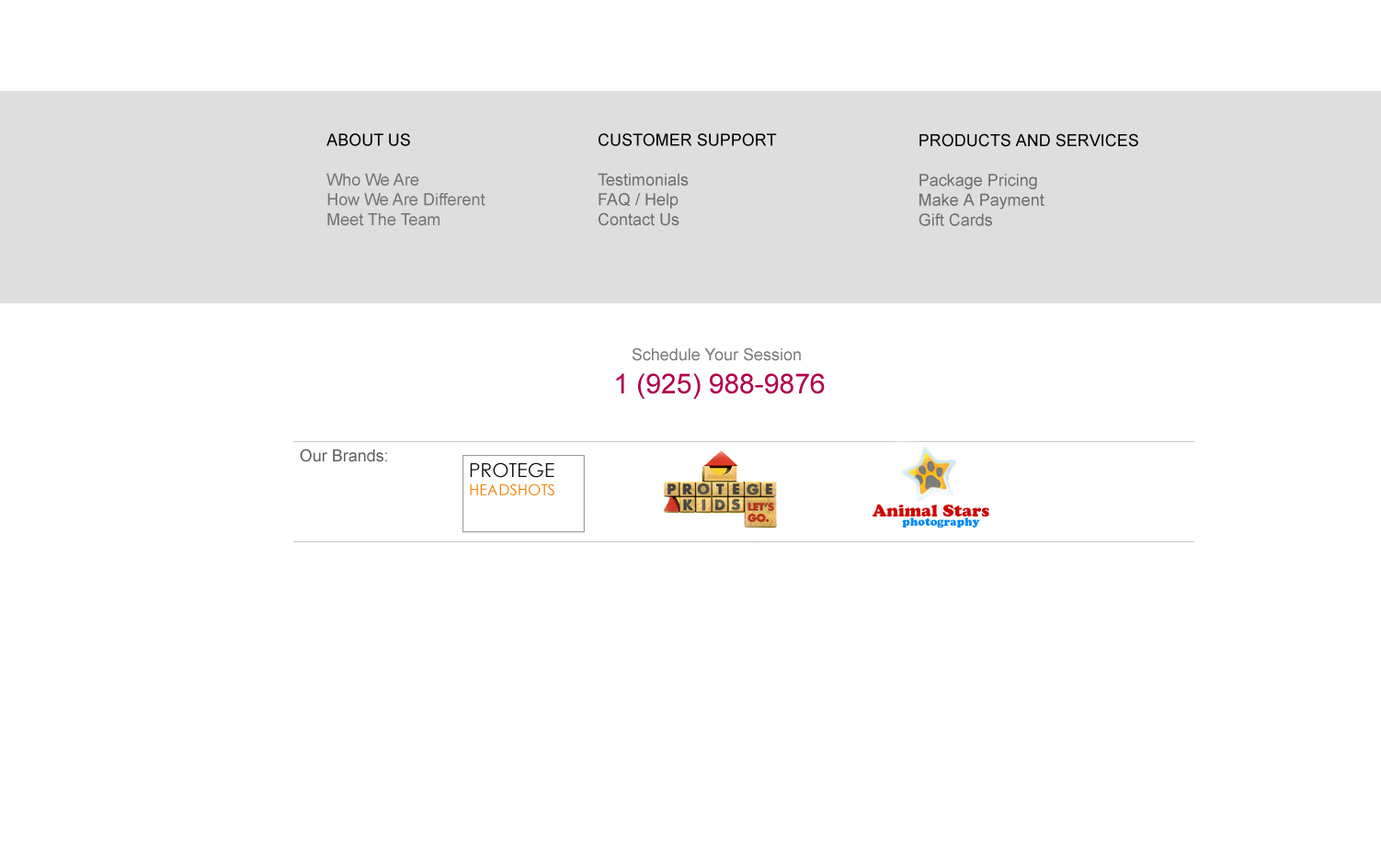
<style>
.page{position:relative;width:1381px;height:863px;background:#ffffff}
.page>*{position:absolute;margin:0}
.t1{font:16.6px "ArialMT";color:#747474}
.t2{font:16.6px "ArialMT";color:#000000}
.t3{font:16.6px "ArialMT";color:#6e6d6d}
.t4{font:16.6px "ArialMT";color:#050505}
.t5{font:16.6px "ArialMT";color:#7b7a7a}
.t6{font:12.9px "ArialMT";color:#5f5f5f}
.t7{font:27.6px "ArialMT";color:#b0014b}
</style>
<div class="page">
<p class="t1" style="left:326px;top:133px;width:159px;height:93px"><span class="t2">ABOUT US<br><br></span>Who We Are<br>How We Are Different<br>Meet The Team</p>
<p class="t3" style="left:598px;top:133px;width:179px;height:93px"><span class="t4">CUSTOMER SUPPORT<br><br></span>Testimonials<br>FAQ / Help<br>Contact Us</p>
<p class="t3" style="left:919px;top:133px;width:219px;height:93px"><span class="t4">PRODUCTS AND SERVICES<br><br></span>Package Pricing<br>Make A Payment<br>Gift Cards</p>
<p class="t5" style="left:616px;top:348px;width:209px;height:51px"><span class="t6">           </span>Schedule Your Session <br><span class="t7">    1 (925) 988-9876</span></p>
</div>
